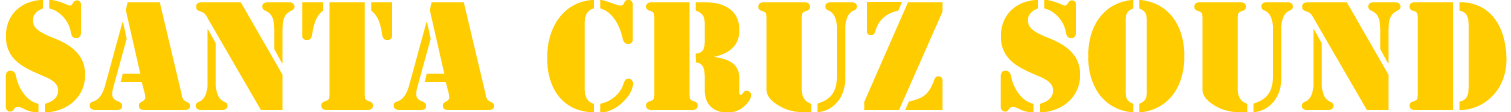
<style>
.page{position:relative;width:1511px;height:112px;background:#ffffff}
.page>*{position:absolute;margin:0}
.t1{font:144px "StencilStd";color:#ffcc00}
</style>
<div class="page">
<p class="t1" style="left:5px;top:0px;width:1502px;height:113px">Santa Cruz Sound</p>
</div>
